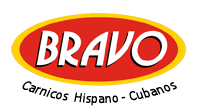
<style>
.page{position:relative;width:200px;height:112px;background:#ffffff}
.page>*{position:absolute;margin:0}
.t1{font:13.3px "Calibri";color:#000000}
</style>
<div class="page">
<p class="t1" style="left:22px;top:81px;width:155px;height:25px">Carnicos  Hispano - Cubanos</p>
</div>
